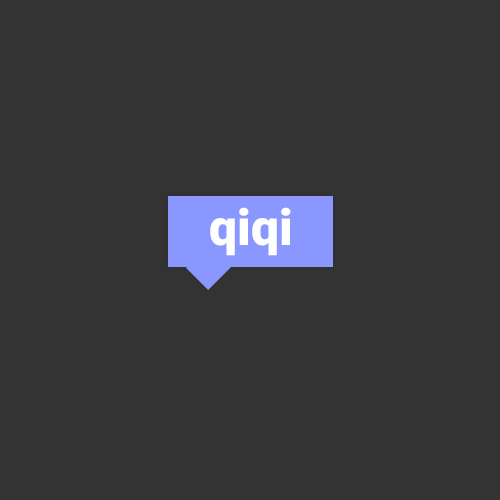
<style>
.page{position:relative;width:500px;height:500px;background:#333333}
.page>*{position:absolute;margin:0}
.t1{font:50px "Roboto-Black";color:#ffffff}
</style>
<div class="page">
<p class="t1" style="left:210px;top:207px;width:81px;height:49px">qiqi</p>
</div>
